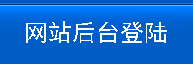
<style>
.page{position:relative;width:193px;height:64px;background:#005dc5}
.page>*{position:absolute;margin:0}
.t1{font:24px "SimHei";color:#fefefe}
</style>
<div class="page">
<p class="t1" style="left:26px;top:21px;width:141px;height:22px">网站后台登陆</p>
</div>
